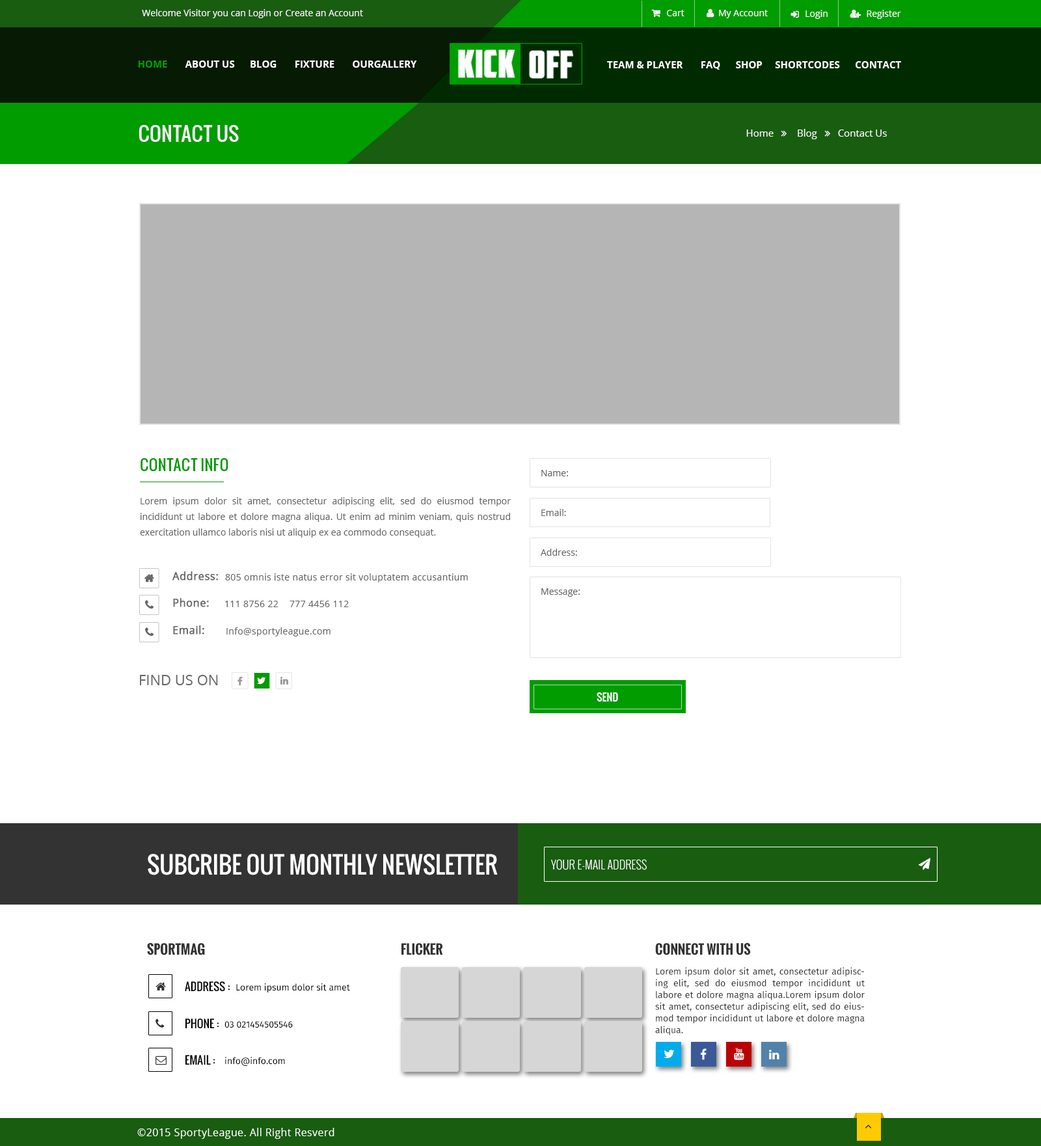
<style>
.page{position:relative;width:1041px;height:1146px;background:#ffffff}
.page>*{position:absolute;margin:0}
.t1{font:9.1px "OpenSans";color:#f4f5f5}
.t2{font:9.8px "OpenSans-Bold";color:#ffffff;text-transform:uppercase}
.t3{font:9.8px "OpenSans-Bold";color:#009c00;text-transform:uppercase}
.t4{font:19.5px "Oswald";color:#f4f5f5}
.t5{font:15.2px "Oswald";color:#009c00;text-transform:uppercase}
.t6{font:9.1px "OpenSans";color:#666666}
.t7{font:9.1px/15.6px "OpenSans";color:#666666}
.t8{font:10.4px "OpenSans";letter-spacing:0.025em;color:#666666;font-weight:bold}
.t9{font:9.1px "OpenSans";letter-spacing:0.025em;color:#666666}
.t10{font:14.3px "OpenSans";color:#666666;text-transform:uppercase}
.t11{font:10.4px "Oswald-Regular";color:#ffffff;text-transform:uppercase}
.t12{font:23.4px "Oswald-Regular";color:#ffffff;text-transform:uppercase}
.t13{font:11.7px "Oswald-Light";color:#ffffff;text-transform:uppercase}
.t14{font:13px "Oswald-Bold";color:#333333;text-transform:uppercase}
.t15{font:9.1px/11.7px "FiraSans-Regular";color:#333333}
.t16{font:11.1px "Oswald-Regular";color:#000000;text-transform:uppercase}
.t17{font:9.1px "FiraSans-Regular";color:#000000}
.t18{font:10.4px "OpenSans";letter-spacing:0.025em;color:#ffffff}
</style>
<div class="page">
<p class="t1" style="left:142px;top:9px;width:221px;height:9px">Welcome Visitor you can Login or Create an Account</p>
<p class="t1" style="left:667px;top:10px;width:17px;height:6px">Cart</p>
<p class="t1" style="left:719px;top:10px;width:49px;height:8px">My Account</p>
<p class="t1" style="left:805px;top:10px;width:22px;height:9px">Login</p>
<p class="t1" style="left:867px;top:10px;width:34px;height:9px">Register</p>
<p class="t2" style="left:138px;top:61px;width:279px;height:7px"><span class="t3">Home </span>      About Us      Blog       Fixture       OURGallery</p>
<p class="t2" style="left:607px;top:61px;width:294px;height:9px">Team &amp; player       FAQ      SHOP     SHORTCODES      CONTACT</p>
<p class="t4" style="left:139px;top:125px;width:100px;height:17px">CONTACT US</p>
<p class="t5" style="left:141px;top:458px;width:87px;height:13px">Contact Info</p>
<p class="t6" style="left:541px;top:470px;width:27px;height:6px">Name:</p>
<p class="t7" style="left:140px;top:497px;width:371px;height:40px;text-align:justify">Lorem ipsum dolor sit amet, consectetur adipiscing elit, sed do eiusmod tempor incididunt ut labore et dolore magna aliqua. Ut enim ad minim veniam, quis nostrud exercitation ullamco laboris nisi ut aliquip ex ea commodo consequat.</p>
<p class="t6" style="left:541px;top:509px;width:25px;height:7px">Email:</p>
<p class="t6" style="left:541px;top:548px;width:36px;height:8px">Address:</p>
<p class="t8" style="left:172px;top:571px;width:46px;height:9px">Address:</p>
<p class="t9" style="left:225px;top:573px;width:243px;height:9px">805 omnis iste natus error sit voluptatem accusantium</p>
<p class="t6" style="left:541px;top:588px;width:39px;height:9px">Message:</p>
<p class="t8" style="left:173px;top:598px;width:36px;height:9px">Phone:</p>
<p class="t9" style="left:225px;top:600px;width:53px;height:7px">111 8756 22</p>
<p class="t9" style="left:289px;top:600px;width:60px;height:7px">777 4456 112</p>
<p class="t8" style="left:173px;top:625px;width:31px;height:9px">Email:</p>
<p class="t9" style="left:226px;top:627px;width:104px;height:9px">Info@sportyleague.com</p>
<p class="t10" style="left:140px;top:675px;width:78px;height:10px">Find Us On</p>
<p class="t11" style="left:597px;top:692px;width:21px;height:9px">Send</p>
<p class="t12" style="left:148px;top:854px;width:350px;height:21px">Subcribe out monthly newsletter</p>
<p class="t13" style="left:551px;top:859px;width:96px;height:11px">your e-mail address</p>
<p class="t14" style="left:147px;top:943px;width:58px;height:12px">sportmag</p>
<p class="t14" style="left:401px;top:943px;width:42px;height:12px">flicker</p>
<p class="t14" style="left:655px;top:943px;width:96px;height:12px">connect with us</p>
<p class="t15" style="left:655px;top:967px;width:210px;height:68px;text-align:justify">Lorem ipsum dolor sit amet, consectetur adipiscing elit, sed do eiusmod tempor incididunt ut labore et dolore magna aliqua.Lorem ipsum dolor sit amet, consectetur adipiscing elit, sed do eiusmod tempor incididunt ut labore et dolore magna aliqua.</p>
<p class="t16" style="left:185px;top:981px;width:45px;height:10px">address :</p>
<p class="t17" style="left:236px;top:983px;width:114px;height:9px">Lorem ipsum dolor sit amet</p>
<p class="t16" style="left:185px;top:1018px;width:34px;height:11px">Phone :</p>
<p class="t17" style="left:224px;top:1021px;width:69px;height:7px">03 021454505546</p>
<p class="t16" style="left:185px;top:1055px;width:30px;height:9px">email :</p>
<p class="t17" style="left:225px;top:1056px;width:60px;height:10px">info@info.com</p>
<p class="t18" style="left:137px;top:1127px;width:197px;height:11px">©2015 SportyLeague. All Right Resverd</p>
</div>
